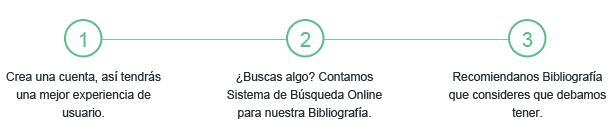
<style>
.page{position:relative;width:613px;height:133px;background:#ffffff}
.page>*{position:absolute;margin:0}
.t1{font:20px "ArialMT";color:#56bd8b}
.t2{font:12px/18px "ArialMT";color:#292f33}
</style>
<div class="page">
<p class="t1" style="left:80px;top:32px;width:6px;height:15px">1</p>
<p class="t1" style="left:300px;top:32px;width:11px;height:15px">2</p>
<p class="t1" style="left:522px;top:32px;width:11px;height:15px">3</p>
<p class="t2" style="left:6px;top:71px;width:155px;height:46px;text-align:center">Crea una cuenta, así tendrás una mejor experiencia de usuario.</p>
<p class="t2" style="left:227px;top:72px;width:155px;height:47px;text-align:center">¿Buscas algo? Contamos Sistema de Búsqueda Online para nuestra Bibliografía.</p>
<p class="t2" style="left:449px;top:71px;width:157px;height:46px;text-align:center">Recomiendanos Bibliografía que consideres que debamos tener.</p>
</div>
